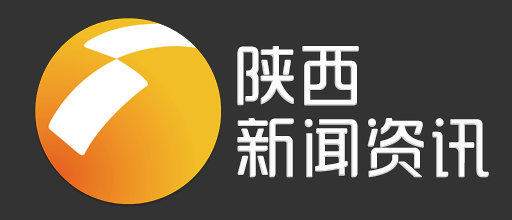
<style>
.page{position:relative;width:512px;height:220px;background:#333333}
.page>*{position:absolute;margin:0}
.t1{font:65px/72px "SJyunlvyuan";color:#fdfdfd}
</style>
<div class="page">
<p class="t1" style="left:237px;top:46px;width:252px;height:132px">陕西<br>新闻资讯</p>
</div>
